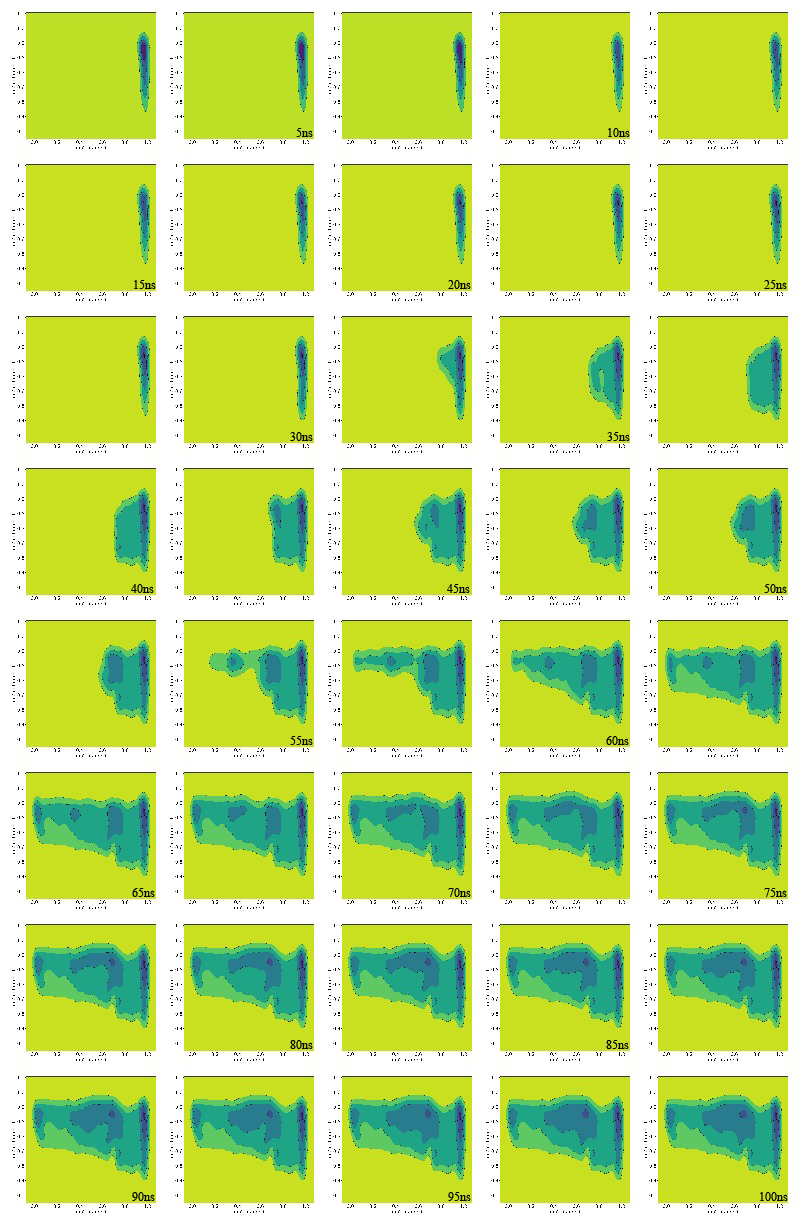
<style>
.page{position:relative;width:800px;height:1226px;background:#c9e020}
.page>*{position:absolute;margin:0}
.t1{font:12px "TimesNewRomanPSMT";color:#000000}
</style>
<div class="page">
<p class="t1" style="left:296px;top:128px;width:17px;height:9px">5ns</p>
<p class="t1" style="left:608px;top:128px;width:22px;height:9px">10ns</p>
<p class="t1" style="left:134px;top:280px;width:22px;height:9px">15ns</p>
<p class="t1" style="left:448px;top:280px;width:23px;height:9px">20ns</p>
<p class="t1" style="left:764px;top:280px;width:23px;height:9px">25ns</p>
<p class="t1" style="left:290px;top:432px;width:23px;height:9px">30ns</p>
<p class="t1" style="left:607px;top:432px;width:23px;height:9px">35ns</p>
<p class="t1" style="left:131px;top:584px;width:23px;height:9px">40ns</p>
<p class="t1" style="left:447px;top:584px;width:23px;height:9px">45ns</p>
<p class="t1" style="left:764px;top:584px;width:23px;height:9px">50ns</p>
<p class="t1" style="left:290px;top:736px;width:23px;height:9px">55ns</p>
<p class="t1" style="left:606px;top:736px;width:23px;height:9px">60ns</p>
<p class="t1" style="left:132px;top:888px;width:23px;height:9px">65ns</p>
<p class="t1" style="left:448px;top:888px;width:23px;height:9px">70ns</p>
<p class="t1" style="left:764px;top:888px;width:23px;height:9px">75ns</p>
<p class="t1" style="left:290px;top:1040px;width:23px;height:9px">80ns</p>
<p class="t1" style="left:606px;top:1040px;width:23px;height:9px">85ns</p>
<p class="t1" style="left:132px;top:1192px;width:23px;height:9px">90ns</p>
<p class="t1" style="left:448px;top:1192px;width:23px;height:9px">95ns</p>
<p class="t1" style="left:760px;top:1192px;width:28px;height:9px">100ns</p>
</div>
